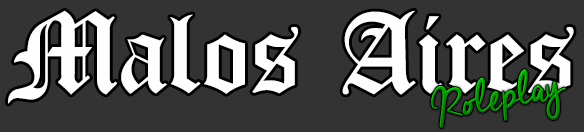
<style>
.page{position:relative;width:584px;height:132px;background:#333333}
.page>*{position:absolute;margin:0}
.t1{font:124.5px "OldLondon";color:#fefefe}
</style>
<div class="page">
<p class="t1" style="left:8px;top:10px;width:566px;height:94px">Malos Aires</p>
</div>
